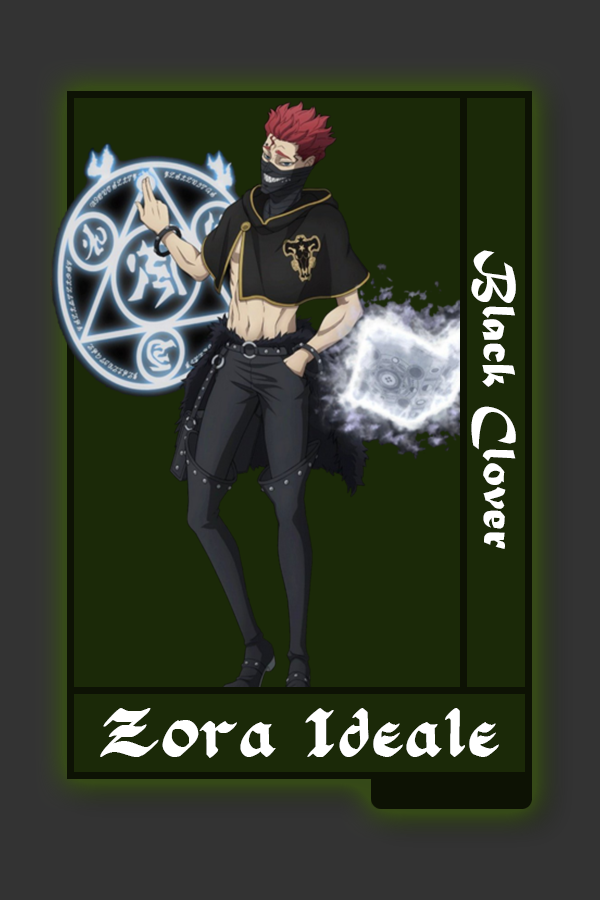
<style>
.page{position:relative;width:600px;height:900px;background:#1b2908}
.page>*{position:absolute;margin:0}
.t1{font:48.8px "MaturaMTScriptCapitals";color:#ffffff}
.t2{font:59.7px "FloranteatLaura";color:#ffffff}
</style>
<div class="page">
<p class="t1" style="left:471px;top:250px;width:45px;height:299px;rotate:90deg">Black Clover</p>
<p class="t2" style="left:100px;top:708px;width:399px;height:50px">Zora Ideale</p>
</div>
